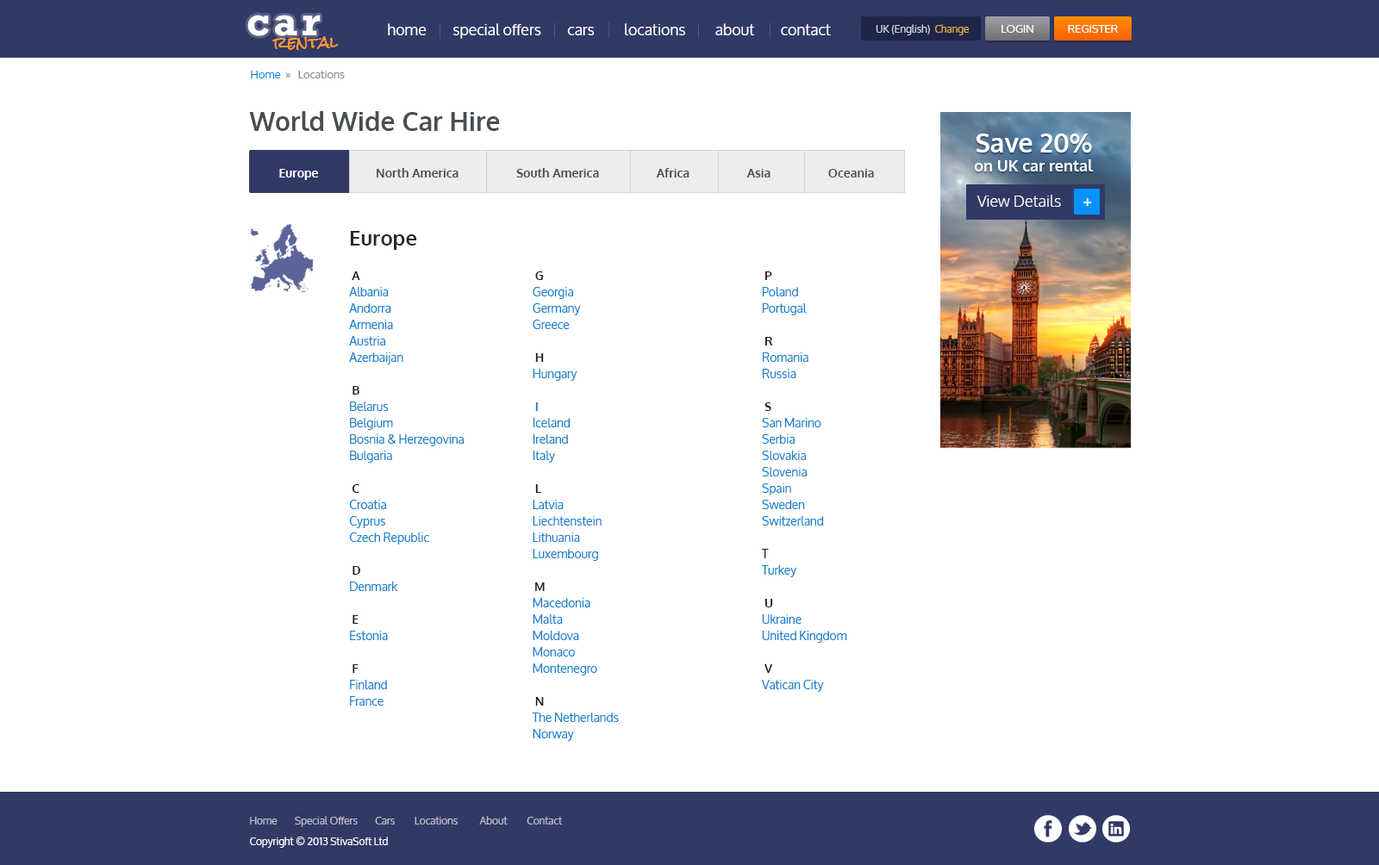
<style>
.page{position:relative;width:1379px;height:865px;background:#ffffff}
.page>*{position:absolute;margin:0}
.t1{font:41.4px "Rockwell-Bold";letter-spacing:0.1em;color:#ffffff}
.t2{font:15.5px "Oxygen";color:#ffffff}
.t3{font:10.3px "Oxygen";color:#d4d4d7}
.t4{font:10.3px "Oxygen";color:#e7ae40}
.t5{font:11.2px "Oxygen";color:#ffffff;text-transform:uppercase}
.t6{font:15.5px "RockSalt";color:#ff9b2f}
.t7{font:11.2px "Oxygen";color:#888b91}
.t8{font:11.2px "Oxygen";color:#0e8be5}
.t9{font:25.8px "Oxygen-Bold";color:#494e52}
.t10{font:15.5px "Oxygen-Bold";color:#ffffff}
.t11{font:25.8px "Oxygen-Bold";color:#ffffff}
.t12{font:12.1px "Oxygen-Bold";color:#494e52}
.t13{font:12.1px "Oxygen-Bold";color:#ffffff}
.t14{font:15.5px "Oxygen-Light";color:#ffffff}
.t15{font:20.7px "Oxygen-Bold";color:#24292c}
.t16{font:12.1px/16.4px "Oxygen";color:#1681cf}
.t17{font:12.1px/16.4px "Oxygen-Bold";color:#1f2020}
.t18{font:12.1px/16.4px "Oxygen-Bold";color:#1681cf}
.t19{font:12.1px/16.4px "Oxygen";color:#1f2020}
.t20{font:10.3px "Oxygen";color:#bfc0c6}
.t21{font:10.3px/20.7px "Oxygen";color:#ffffff}
</style>
<div class="page">
<p class="t1" style="left:247px;top:15px;width:74px;height:21px">car</p>
<p class="t2" style="left:388px;top:23px;width:443px;height:16px">home        special offers        cars         locations         about        contact</p>
<p class="t3" style="left:875px;top:24px;width:93px;height:11px">UK (English)  <span class="t4">Change</span></p>
<p class="t5" style="left:1001px;top:25px;width:32px;height:8px">Login</p>
<p class="t5" style="left:1067px;top:25px;width:50px;height:8px">Register</p>
<p class="t6" style="left:272px;top:36px;width:67px;height:14px">rental</p>
<p class="t7" style="left:251px;top:70px;width:94px;height:8px"><span class="t8"> Home</span>  »   Locations</p>
<p class="t9" style="left:249px;top:111px;width:251px;height:20px">World Wide Car Hire</p>
<p class="t10" style="left:974px;top:134px;width:119px;height:37px;text-align:center"><span class="t11">Save 20% <br></span>on UK car rental</p>
<p class="t12" style="left:279px;top:168px;width:595px;height:12px"><span class="t13">Europe     </span>             North America                  South America                  Africa                  Asia                  Oceania</p>
<p class="t14" style="left:976px;top:195px;width:116px;height:12px">View Details     <span class="t10"> +</span></p>
<p class="t15" style="left:350px;top:231px;width:67px;height:19px">Europe</p>
<p class="t16" style="left:349px;top:271px;width:115px;height:435px"><span class="t17">    A<br></span>    Albania<br>    Andorra<br>    Armenia<br>    Austria<br>    Azerbaijan<br><br><span class="t17">    B<br></span>    Belarus<br>    Belgium<br>    Bosnia &amp; Herzegovina<br>    Bulgaria<br><br><span class="t17">    C<br></span>    Croatia<br>    Cyprus<br>    Czech Republic<br><br><span class="t17">    D<br></span>    Denmark<br><br><span class="t17">    E<br></span>    Estonia<br><br><span class="t17">    F<br></span>    Finland<br>    France</p>
<p class="t16" style="left:532px;top:271px;width:87px;height:470px"><span class="t17">    G<br></span>    Georgia<br>    Germany<br>    Greece  <br>    <br><span class="t17">    H<br></span>    Hungary<br><br><span class="t18">    I<br></span>    Iceland<br>    Ireland<br>    Italy<br><br><span class="t17">    L<br></span>    Latvia<br>    Liechtenstein<br>    Lithuania<br>    Luxembourg<br><br> <span class="t17">   M<br></span>    Macedonia<br>    Malta<br>    Moldova<br>    Monaco<br>    Montenegro<br><br><span class="t17">    N<br></span>    The Netherlands<br>    Norway</p>
<p class="t16" style="left:761px;top:271px;width:86px;height:421px"><span class="t17">    P<br></span>    Poland<br>    Portugal<br><br><span class="t17">    R<br></span>    Romania<br>    Russia<br><br><span class="t17">    S<br></span>    San Marino<br>    Serbia<br>    Slovakia<br>    Slovenia<br>    Spain<br>    Sweden<br>    Switzerland  <br><br><span class="t19">    T<br></span>    Turkey<br><span class="t17"><br>    U<br></span>    Ukraine<br>    United Kingdom<br><br><span class="t17">    V<br></span>    Vatican City</p>
<p class="t20" style="left:250px;top:816px;width:312px;height:32px">Home        Special Offers        Cars         Locations          About         Contact<br><span class="t21">Copyright © 2013 StivaSoft Ltd</span></p>
</div>
